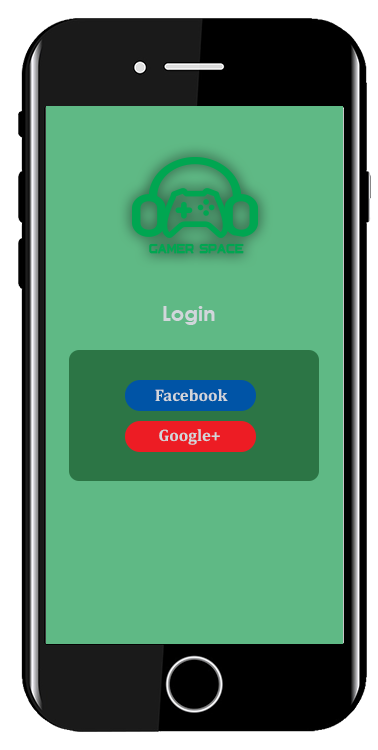
<style>
.page{position:relative;width:378px;height:750px;background:#5fb985}
.page>*{position:absolute;margin:0}
.t1{font:20.9px "CenturyGothic-Bold";color:#d1d6db}
.t2{font:16.7px "Cambria-Bold";color:#d1d6db}
</style>
<div class="page">
<p class="t1" style="left:163px;top:306px;width:52px;height:19px">Login</p>
<p class="t2" style="left:155px;top:389px;width:73px;height:13px">Facebook</p>
<p class="t2" style="left:159px;top:429px;width:61px;height:16px">Google+</p>
</div>
